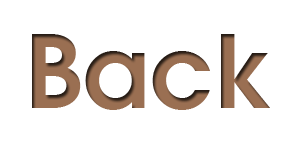
<style>
.page{position:relative;width:300px;height:144px;background:#ffffff}
.page>*{position:absolute;margin:0}
.t1{font:100px "AvantGarde-Demi";color:#9a6f52}
</style>
<div class="page">
<p class="t1" style="left:32px;top:34px;width:238px;height:76px">Back</p>
</div>
